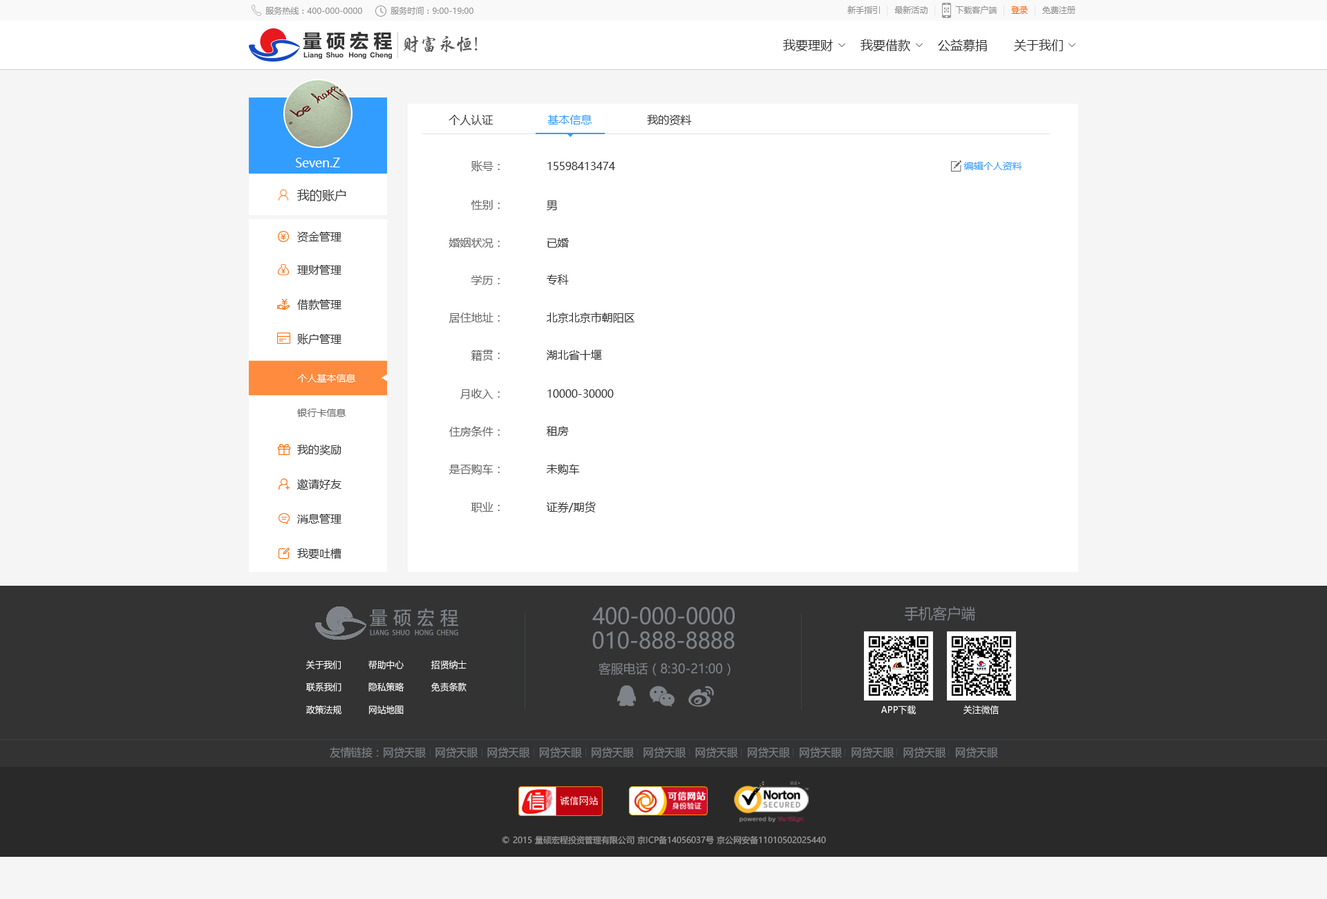
<style>
.page{position:relative;width:1327px;height:899px;background:#ffffff}
.page>*{position:absolute;margin:0}
.t1{font:8.3px "MicrosoftYaHei";color:#909090}
.t2{font:8.3px "MicrosoftYaHei";color:#ff6803}
.t3{font:19.6px "FZLTCHJW--GB1-0";letter-spacing:0.2em;color:#333333}
.t4{font:18.4px "Tensentype-BoDangXingKaiJ";color:#555555;scale:0.96 1}
.t5{font:12.4px "MicrosoftYaHei";color:#333333}
.t6{font:6.2px "FZLTDHK--GBK1-0";color:#333333;scale:0.96 1}
.t7{font:11.1px "MicrosoftYaHei";color:#333333}
.t8{font:11.1px "MicrosoftYaHei";color:#329dff}
.t9{font:12.4px "MicrosoftYaHei";color:#ffffff}
.t10{font:11.1px "MicrosoftYaHei";color:#646464}
.t11{font:9.7px "MicrosoftYaHei";color:#329dff}
.t12{font:9.7px "MicrosoftYaHei";color:#ffffff}
.t13{font:9.7px "MicrosoftYaHei";color:#646464}
.t14{font:14.7px "MicrosoftYaHei";color:#7f848a;scale:0.96 1}
.t15{font:19.6px "AdobeHeitiStd-Regular";letter-spacing:0.2em;color:#7f848a}
.t16{font:22.1px "MicrosoftYaHei";color:#7f848a;scale:0.96 1}
.t17{font:7px "AdobeHeitiStd-Regular";color:#7f848a;text-transform:uppercase;scale:0.96 1}
.t18{font:9.2px "MicrosoftYaHei";color:#ffffff;scale:0.96 1}
.t19{font:12.9px "MicrosoftYaHei";color:#7f848a;scale:0.96 1}
.t20{font:11px "MicrosoftYaHei";color:#7f848a;scale:0.96 1}
.t21{font:8.3px "MicrosoftYaHei";color:#999999}
</style>
<div class="page">
<p class="t1" style="left:847px;top:6px;width:33px;height:8px">新手指引</p>
<p class="t1" style="left:894px;top:6px;width:34px;height:8px">最新活动</p>
<p class="t1" style="left:955px;top:6px;width:42px;height:8px">下载客户端</p>
<p class="t1" style="left:265px;top:7px;width:97px;height:8px">服务热线：400-000-0000</p>
<p class="t1" style="left:391px;top:7px;width:82px;height:8px">服务时间：9:00-19:00</p>
<p class="t2" style="left:1011px;top:6px;width:17px;height:8px">登录</p>
<p class="t1" style="left:1042px;top:6px;width:33px;height:8px">免费注册</p>
<p class="t3" style="left:303px;top:31px;width:89px;height:19px">量硕宏程</p>
<p class="t4" style="left:403px;top:35px;width:75px;height:18px">财富永恒!</p>
<p class="t5" style="left:783px;top:39px;width:50px;height:12px">我要理财</p>
<p class="t5" style="left:861px;top:39px;width:49px;height:12px">我要借款</p>
<p class="t5" style="left:938px;top:39px;width:49px;height:12px">公益募捐</p>
<p class="t5" style="left:1014px;top:39px;width:49px;height:12px">关于我们</p>
<p class="t6" style="left:303px;top:52px;width:89px;height:7px">Liang  Shuo   Hong  Cheng</p>
<p class="t7" style="left:449px;top:115px;width:45px;height:10px">个人认证</p>
<p class="t8" style="left:547px;top:115px;width:45px;height:9px">基本信息</p>
<p class="t7" style="left:647px;top:115px;width:45px;height:10px">我的资料</p>
<p class="t9" style="left:296px;top:158px;width:44px;height:9px">Seven.Z</p>
<p class="t10" style="left:471px;top:160px;width:29px;height:11px">账号：</p>
<p class="t7" style="left:547px;top:162px;width:68px;height:8px">15598413474</p>
<p class="t11" style="left:964px;top:162px;width:58px;height:8px">编辑个人资料</p>
<p class="t5" style="left:297px;top:189px;width:49px;height:12px">我的账户</p>
<p class="t10" style="left:471px;top:200px;width:29px;height:10px">性别：</p>
<p class="t7" style="left:547px;top:200px;width:10px;height:10px">男</p>
<p class="t7" style="left:297px;top:232px;width:44px;height:10px">资金管理</p>
<p class="t10" style="left:449px;top:238px;width:51px;height:9px">婚姻状况：</p>
<p class="t7" style="left:547px;top:238px;width:22px;height:9px">已婚</p>
<p class="t7" style="left:297px;top:265px;width:44px;height:9px">理财管理</p>
<p class="t10" style="left:471px;top:275px;width:29px;height:10px">学历：</p>
<p class="t7" style="left:547px;top:274px;width:22px;height:11px">专科</p>
<p class="t7" style="left:297px;top:299px;width:44px;height:11px">借款管理</p>
<p class="t10" style="left:449px;top:312px;width:51px;height:11px">居住地址：</p>
<p class="t7" style="left:547px;top:312px;width:88px;height:11px">北京北京市朝阳区</p>
<p class="t7" style="left:297px;top:333px;width:44px;height:11px">账户管理</p>
<p class="t10" style="left:471px;top:350px;width:29px;height:11px">籍贯：</p>
<p class="t7" style="left:547px;top:350px;width:55px;height:10px">湖北省十堰</p>
<p class="t12" style="left:297px;top:374px;width:59px;height:8px">个人基本信息</p>
<p class="t10" style="left:460px;top:388px;width:40px;height:11px">月收入：</p>
<p class="t7" style="left:547px;top:389px;width:67px;height:8px">10000-30000</p>
<p class="t13" style="left:297px;top:408px;width:49px;height:9px">银行卡信息</p>
<p class="t10" style="left:449px;top:426px;width:51px;height:11px">住房条件：</p>
<p class="t7" style="left:547px;top:426px;width:22px;height:10px">租房</p>
<p class="t7" style="left:297px;top:444px;width:44px;height:11px">我的奖励</p>
<p class="t10" style="left:449px;top:464px;width:51px;height:10px">是否购车：</p>
<p class="t7" style="left:547px;top:464px;width:33px;height:10px">未购车</p>
<p class="t7" style="left:297px;top:479px;width:44px;height:10px">邀请好友</p>
<p class="t10" style="left:471px;top:502px;width:29px;height:10px">职业：</p>
<p class="t7" style="left:546px;top:501px;width:50px;height:11px">证券/期货</p>
<p class="t7" style="left:297px;top:514px;width:44px;height:9px">消息管理</p>
<p class="t7" style="left:297px;top:548px;width:44px;height:10px">我要吐槽</p>
<p class="t14" style="left:905px;top:605px;width:70px;height:16px">手机客户端</p>
<p class="t15" style="left:370px;top:608px;width:88px;height:18px">量硕宏程</p>
<p class="t16" style="left:592px;top:606px;width:143px;height:18px">400-000-0000</p>
<p class="t17" style="left:370px;top:629px;width:88px;height:6px">Liang  Shuo   Hong  Cheng</p>
<p class="t16" style="left:592px;top:631px;width:143px;height:18px">010-888-8888</p>
<p class="t18" style="left:306px;top:660px;width:35px;height:9px">关于我们</p>
<p class="t18" style="left:368px;top:660px;width:36px;height:9px">帮助中心</p>
<p class="t18" style="left:431px;top:659px;width:36px;height:10px">招贤纳士</p>
<p class="t19" style="left:599px;top:662px;width:132px;height:13px">客服电话（8:30-21:00）</p>
<p class="t18" style="left:306px;top:682px;width:35px;height:9px">联系我们</p>
<p class="t18" style="left:368px;top:682px;width:36px;height:9px">隐私策略</p>
<p class="t18" style="left:431px;top:682px;width:36px;height:9px">免责条款</p>
<p class="t18" style="left:306px;top:705px;width:35px;height:9px">政策法规</p>
<p class="t18" style="left:369px;top:705px;width:35px;height:9px">网站地图</p>
<p class="t18" style="left:881px;top:705px;width:35px;height:9px">APP下载</p>
<p class="t18" style="left:964px;top:705px;width:35px;height:9px">关注微信</p>
<p class="t20" style="left:330px;top:746px;width:668px;height:12px">友情链接：网贷天眼   网贷天眼   网贷天眼   网贷天眼   网贷天眼   网贷天眼   网贷天眼   网贷天眼   网贷天眼   网贷天眼   网贷天眼   网贷天眼</p>
<p class="t21" style="left:502px;top:835px;width:324px;height:9px">© 2015 量硕宏程投资管理有限公司 京ICP备14056037号 京公网安备11010502025440</p>
</div>
